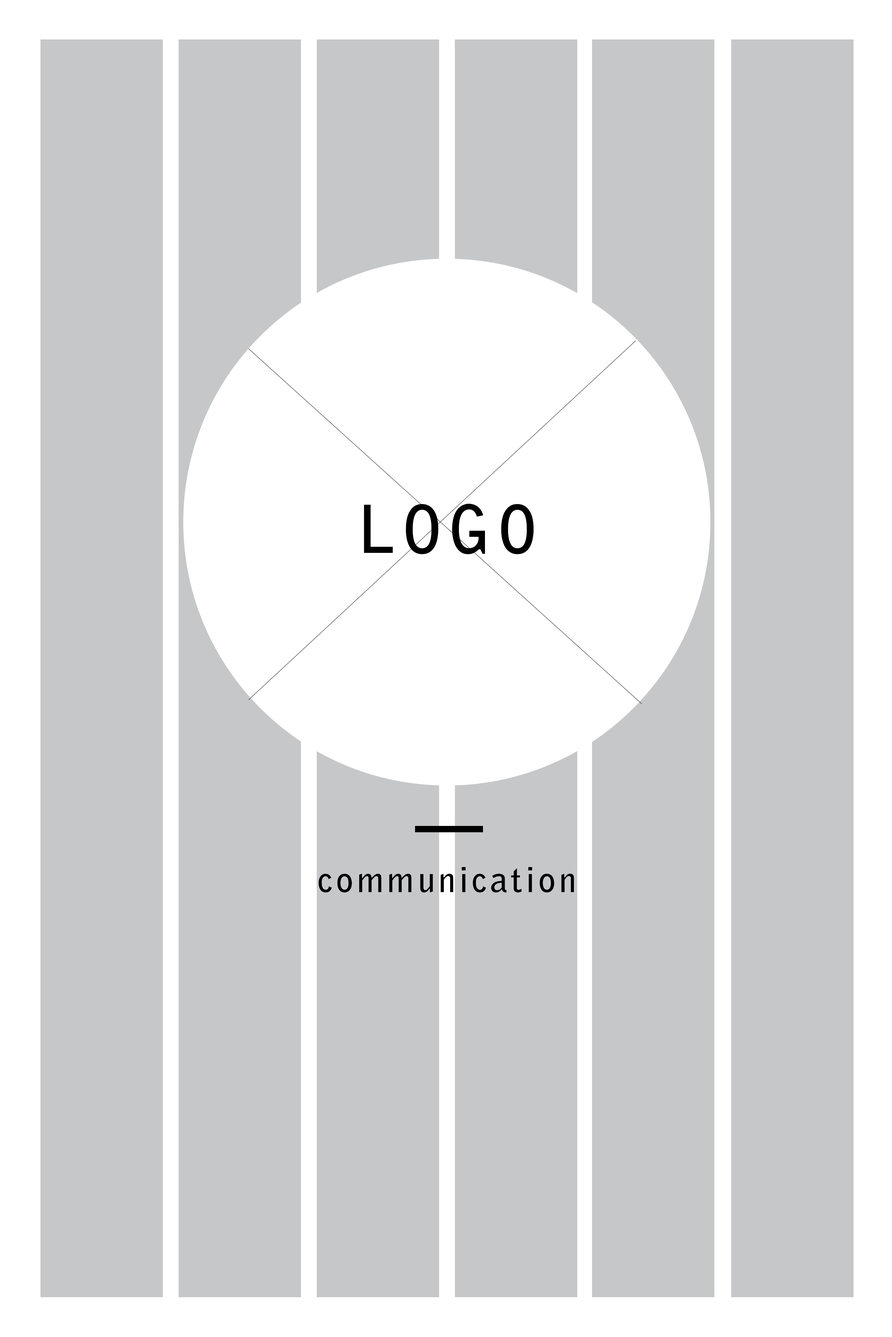
<style>
.page{position:relative;width:892px;height:1337px;background:#c6c7c9}
.page>*{position:absolute;margin:0}
.t1{font:65.5px "BellGothicStd-Bold";letter-spacing:0.09em;color:#000000}
.t2{font:34.8px "BellGothicStd-Bold";letter-spacing:0.09em;color:#000000}
</style>
<div class="page">
<p class="t1" style="left:364px;top:504px;width:170px;height:50px">LOGO</p>
<p class="t2" style="left:318px;top:867px;width:256px;height:26px">communication</p>
</div>
